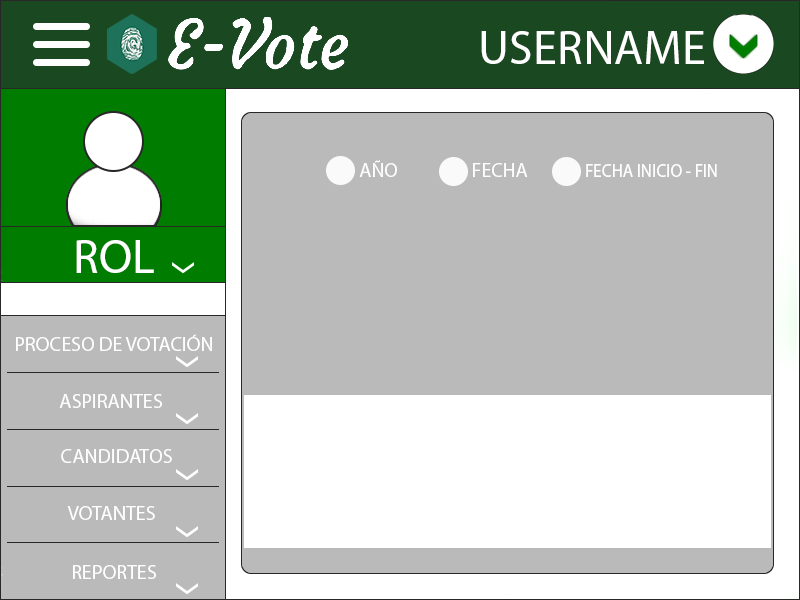
<style>
.page{position:relative;width:800px;height:600px;background:#bababa}
.page>*{position:absolute;margin:0}
.t1{font:48px "MyriadPro-Regular";color:#ffffff}
.t2{font:20px "MyriadPro-Regular";color:#ffffff}
.t3{font:18.4px "MyriadPro-Regular";color:#ffffff;scale:0.93 1}
</style>
<div class="page">
<p class="t1" style="left:481px;top:31px;width:223px;height:33px">USERNAME</p>
<p class="t2" style="left:359px;top:160px;width:38px;height:17px">AÑO</p>
<p class="t2" style="left:473px;top:163px;width:55px;height:14px">FECHA</p>
<p class="t3" style="left:586px;top:164px;width:131px;height:13px">FECHA INICIO - FIN</p>
<p class="t1" style="left:76px;top:240px;width:78px;height:33px">ROL</p>
<p class="t2" style="left:16px;top:334px;width:196px;height:17px">PROCESO DE VOTACIÓN</p>
<p class="t2" style="left:59px;top:394px;width:103px;height:14px">ASPIRANTES</p>
<p class="t2" style="left:61px;top:449px;width:111px;height:14px">CANDIDATOS</p>
<p class="t2" style="left:67px;top:506px;width:88px;height:14px">VOTANTES</p>
<p class="t2" style="left:73px;top:565px;width:83px;height:14px">REPORTES</p>
</div>
